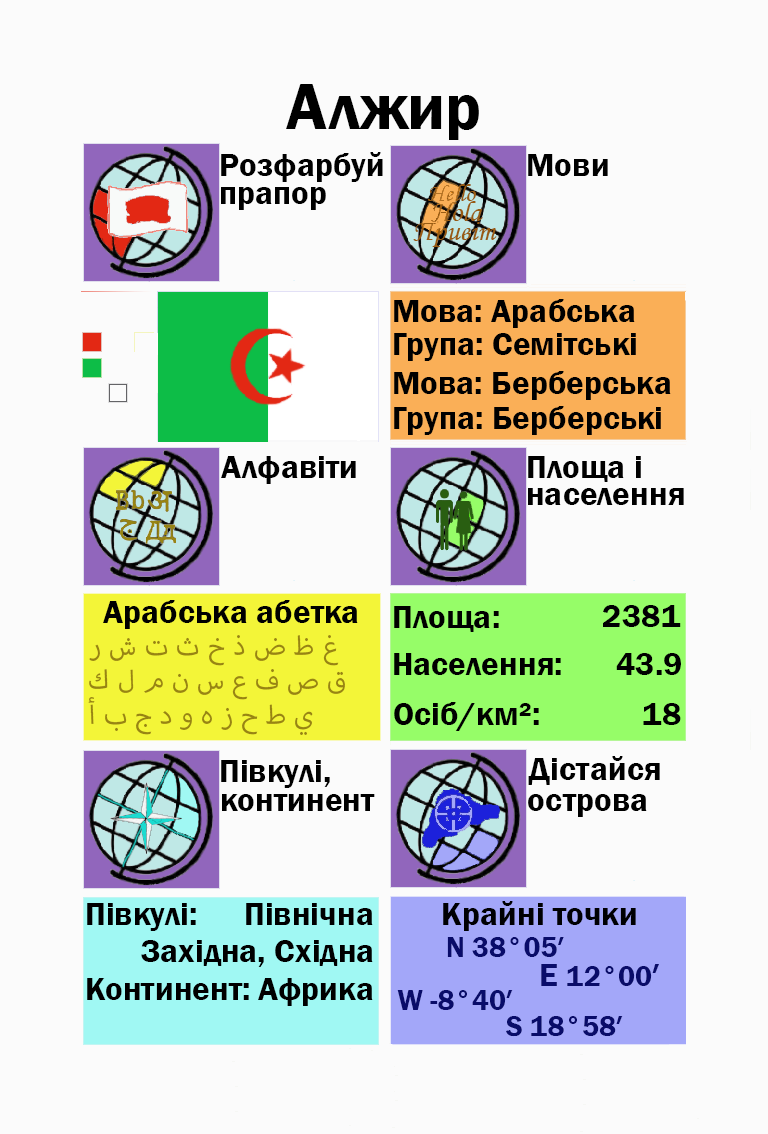
<style>
.page{position:relative;width:768px;height:1134px;background:#fbfbfb}
.page>*{position:absolute;margin:0}
.t1{font:66.7px "FranklinGothic-Demi";color:#000000}
.t2{font:33.3px "FranklinGothic-Demi";color:#000000}
.t3{font:33.3px "FranklinGothic-Demi";color:#000003}
.t4{font:37.5px "MyriadArabic-Regular";color:#988413}
.t5{font:29.2px "FranklinGothic-Demi";color:#988413}
.t6{font:29.2px "FranklinGothic-Demi";color:#090c69}
.t7{font:33.3px "FranklinGothic-Demi";color:#090c69}
</style>
<div class="page">
<p class="t1" style="left:286px;top:84px;width:193px;height:56px">Алжир</p>
<p class="t2" style="left:221px;top:152px;width:162px;height:30px">Розфарбуй</p>
<p class="t2" style="left:528px;top:154px;width:80px;height:22px">Мови</p>
<p class="t2" style="left:221px;top:187px;width:105px;height:23px">прапор</p>
<p class="t2" style="left:394px;top:299px;width:241px;height:29px">Мова: Арабська</p>
<p class="t2" style="left:394px;top:333px;width:242px;height:28px">Група: Семітські</p>
<p class="t2" style="left:394px;top:371px;width:277px;height:29px">Мова: Берберська</p>
<p class="t2" style="left:394px;top:406px;width:267px;height:29px">Група: Берберські</p>
<p class="t2" style="left:221px;top:456px;width:135px;height:28px">Алфавіти</p>
<p class="t2" style="left:528px;top:456px;width:113px;height:26px">Площа і</p>
<p class="t2" style="left:528px;top:488px;width:156px;height:17px">населення</p>
<p class="t2" style="left:103px;top:600px;width:255px;height:29px">Арабська абетка</p>
<p class="t2" style="left:394px;top:606px;width:105px;height:26px">Площа:</p>
<p class="t3" style="left:603px;top:605px;width:78px;height:22px">2381</p>
<p class="t4" style="left:89px;top:635px;width:250px;height:31px"><span class="t5"><br></span>ر ش ت ث خ ذ ض ظ غ</p>
<p class="t2" style="left:394px;top:653px;width:167px;height:22px">Населення:</p>
<p class="t2" style="left:616px;top:653px;width:65px;height:22px">43.9</p>
<p class="t4" style="left:89px;top:669px;width:256px;height:31px">ك ل م ن س ع ف ص ق</p>
<p class="t4" style="left:88px;top:697px;width:225px;height:38px">أ ب ج د و ه ز ح ط ي</p>
<p class="t2" style="left:394px;top:702px;width:145px;height:29px">Осіб/км²:</p>
<p class="t2" style="left:643px;top:703px;width:38px;height:22px">18</p>
<p class="t2" style="left:221px;top:760px;width:109px;height:28px">Півкулі,</p>
<p class="t2" style="left:528px;top:756px;width:132px;height:29px">Дістайся</p>
<p class="t2" style="left:222px;top:794px;width:153px;height:17px">континент</p>
<p class="t2" style="left:528px;top:794px;width:119px;height:23px">острова</p>
<p class="t2" style="left:87px;top:903px;width:109px;height:28px">Півкулі:</p>
<p class="t2" style="left:246px;top:903px;width:127px;height:22px">Північна</p>
<p class="t3" style="left:443px;top:901px;width:193px;height:30px">Крайні точки</p>
<p class="t2" style="left:141px;top:940px;width:232px;height:27px">Західна, Східна</p>
<p class="t6" style="left:447px;top:937px;width:117px;height:20px">N 38°05′</p>
<p class="t6" style="left:541px;top:964px;width:118px;height:22px"><span class="t7">E </span>12°00<span class="t7">′</span></p>
<p class="t2" style="left:87px;top:978px;width:162px;height:22px">Континент:</p>
<p class="t2" style="left:258px;top:978px;width:115px;height:28px">Африка</p>
<p class="t6" style="left:397px;top:990px;width:116px;height:20px">W -8°40′</p>
<p class="t6" style="left:506px;top:1016px;width:117px;height:21px">S 18°58′</p>
</div>
